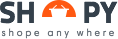
<style>
.page{position:relative;width:118px;height:39px;background:#ffffff}
.page>*{position:absolute;margin:0}
.t1{font:30px "TitilliumText22L-XBold";color:#34404b}
.t2{font:17px "HarmoniaSansProCyr-Regular";letter-spacing:0.28em;color:#6b737b}
</style>
<div class="page">
<p class="t1" style="left:0px;top:1px;width:118px;height:23px">SH     PY</p>
<p class="t2" style="left:1px;top:28px;width:113px;height:11px">shope any where</p>
</div>
